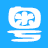
<style>
.page{position:relative;width:48px;height:48px;background:#1dadff}
.page>*{position:absolute;margin:0}
.t1{font:39px "SXSLST";color:#fffffe}
</style>
<div class="page">
<p class="t1" style="left:7px;top:6px;width:35px;height:36px">粤</p>
</div>
